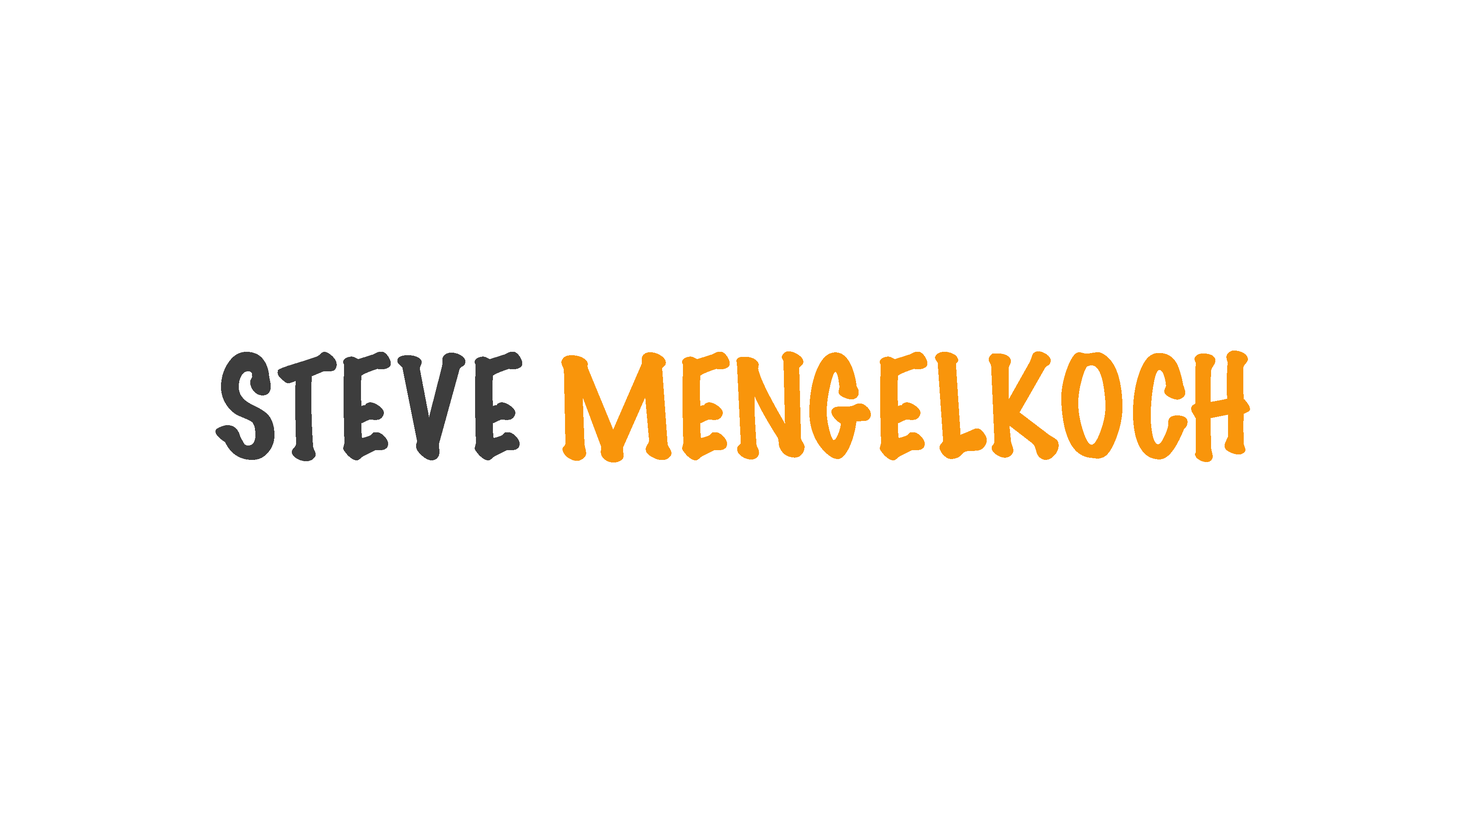
<style>
.page{position:relative;width:1466px;height:813px;background:#ffffff}
.page>*{position:absolute;margin:0}
.t1{font:127px "MarkerFelt-Thin";color:#f9950b}
.t2{font:127px "MarkerFelt-Thin";color:#3d3d3d}
</style>
<div class="page">
<p class="t1" style="left:215px;top:351px;width:1035px;height:112px"><span class="t2">STEVE </span>MENGELKOCH</p>
</div>
